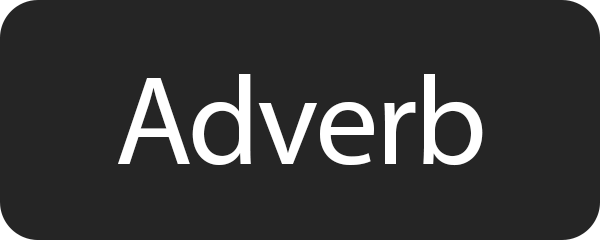
<style>
.page{position:relative;width:600px;height:240px;background:#252525}
.page>*{position:absolute;margin:0}
.t1{font:127px "MyriadPro-Regular";letter-spacing:-0.02em;color:#ffffff}
</style>
<div class="page">
<p class="t1" style="left:118px;top:74px;width:365px;height:92px">Adverb</p>
</div>
